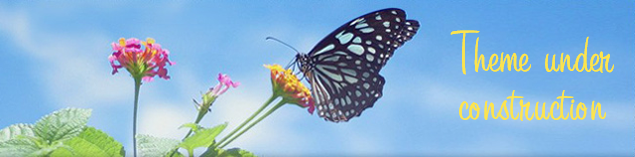
<style>
.page{position:relative;width:635px;height:157px}
.page>*{position:absolute;margin:0}
.t1{font:59.5px/48px "SignPainter-HouseCasual";letter-spacing:0.015em;color:#fde44d}
.t2{font:59.5px/53.8px "SignPainter-HouseCasual";letter-spacing:0.015em;color:#fde44d}
</style>
<div class="page">
<p class="t1" style="left:450px;top:30px;width:164px;height:91px;text-align:center"><span class="t2">T</span>heme under<br>construction</p>
<p class="t1" style="left:450px;top:30px;width:164px;height:91px;text-align:center"><span class="t2">T</span>heme under<br>construction</p>
</div>
